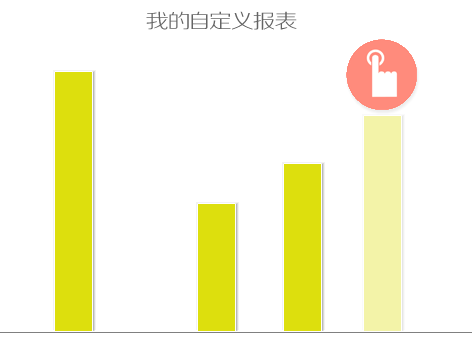
<style>
.page{position:relative;width:472px;height:339px;background:#ffffff}
.page>*{position:absolute;margin:0}
.t1{font:19.9px "FZZXHJW--GB1-0";letter-spacing:0.005em;color:#646464;scale:1.15 1}
</style>
<div class="page">
<p class="t1" style="left:146px;top:11px;width:151px;height:19px">我的自定义报表</p>
</div>
